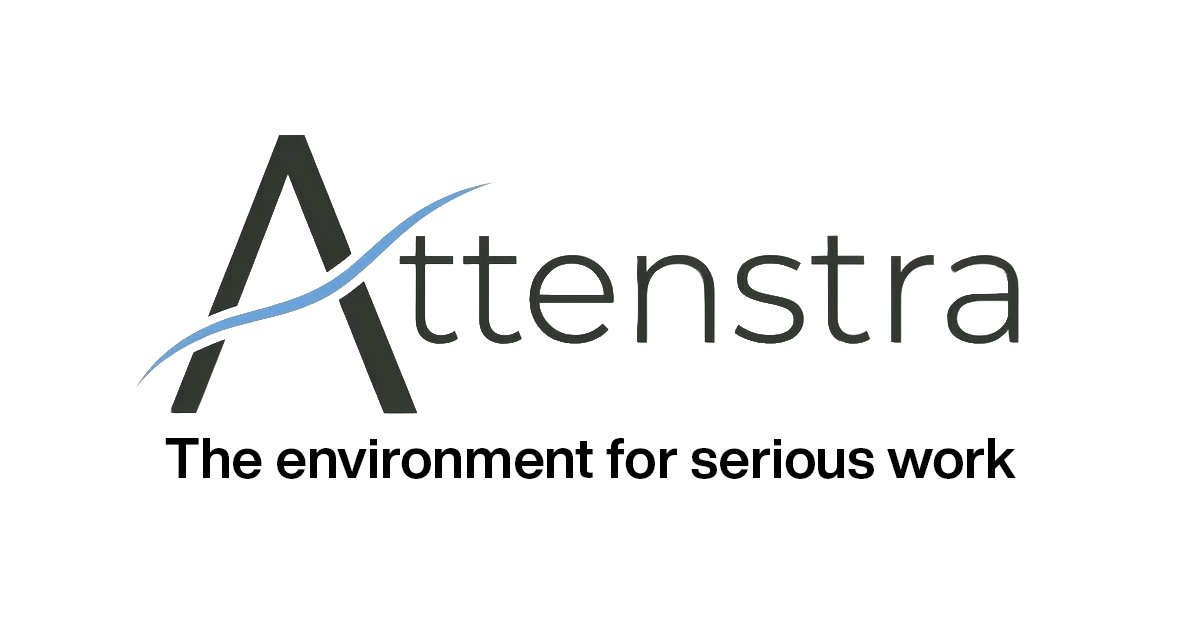
<style>
.page{position:relative;width:1200px;height:630px;background:#ffffff}
.page>*{position:absolute;margin:0}
.t1{font:56px "HelveticaNowDisplay-Bd";color:#000000}
</style>
<div class="page">
<p class="t1" style="left:165px;top:438px;width:851px;height:41px">The environment for serious work</p>
</div>
